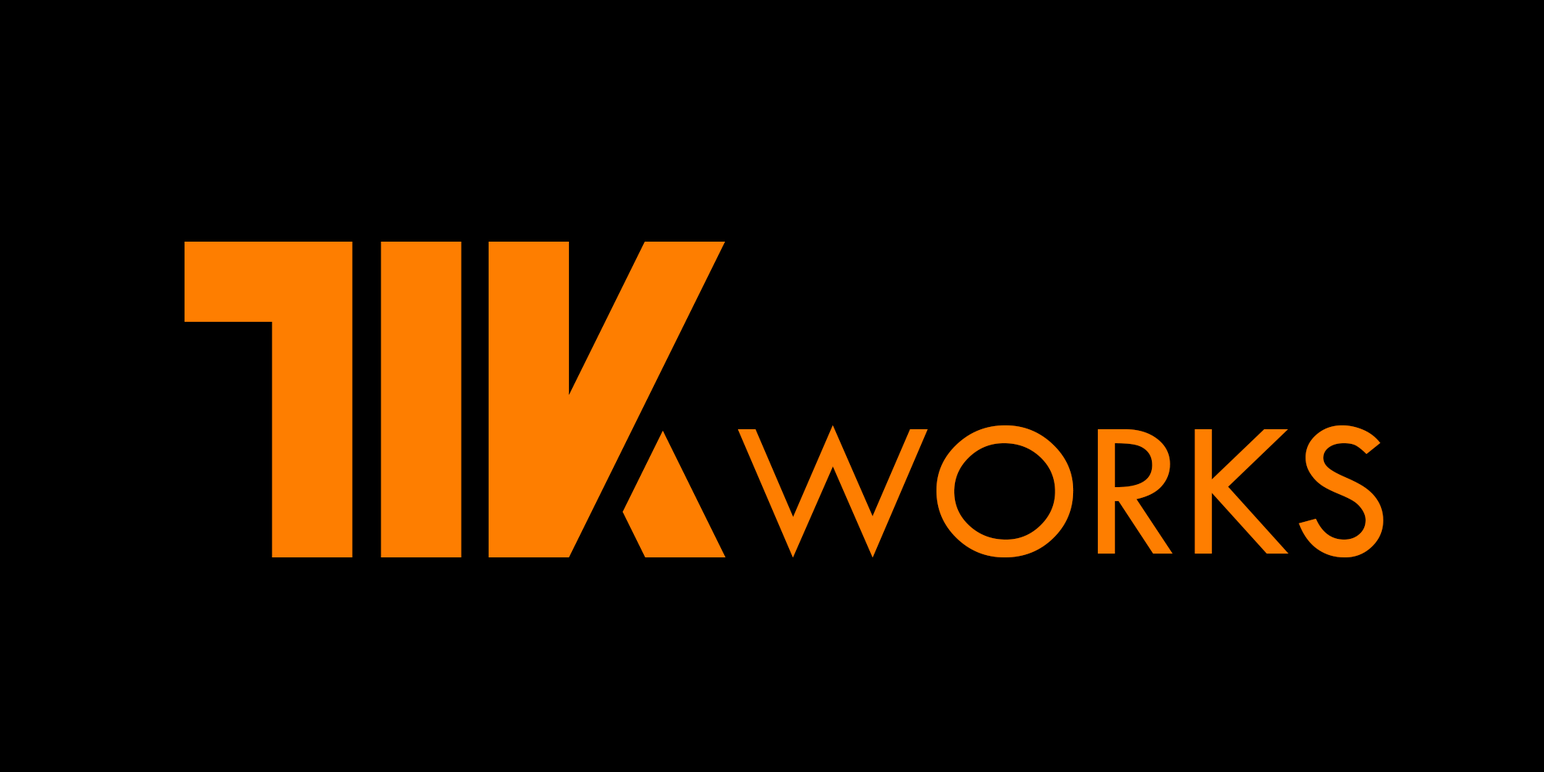
<style>
.page{position:relative;width:1544px;height:772px;background:#000000}
.page>*{position:absolute;margin:0}
.t1{font:199.4px "TwCenMT-Regular";color:#fe7e00}
</style>
<div class="page">
<p class="t1" style="left:737px;top:425px;width:647px;height:132px">WORKS</p>
</div>
